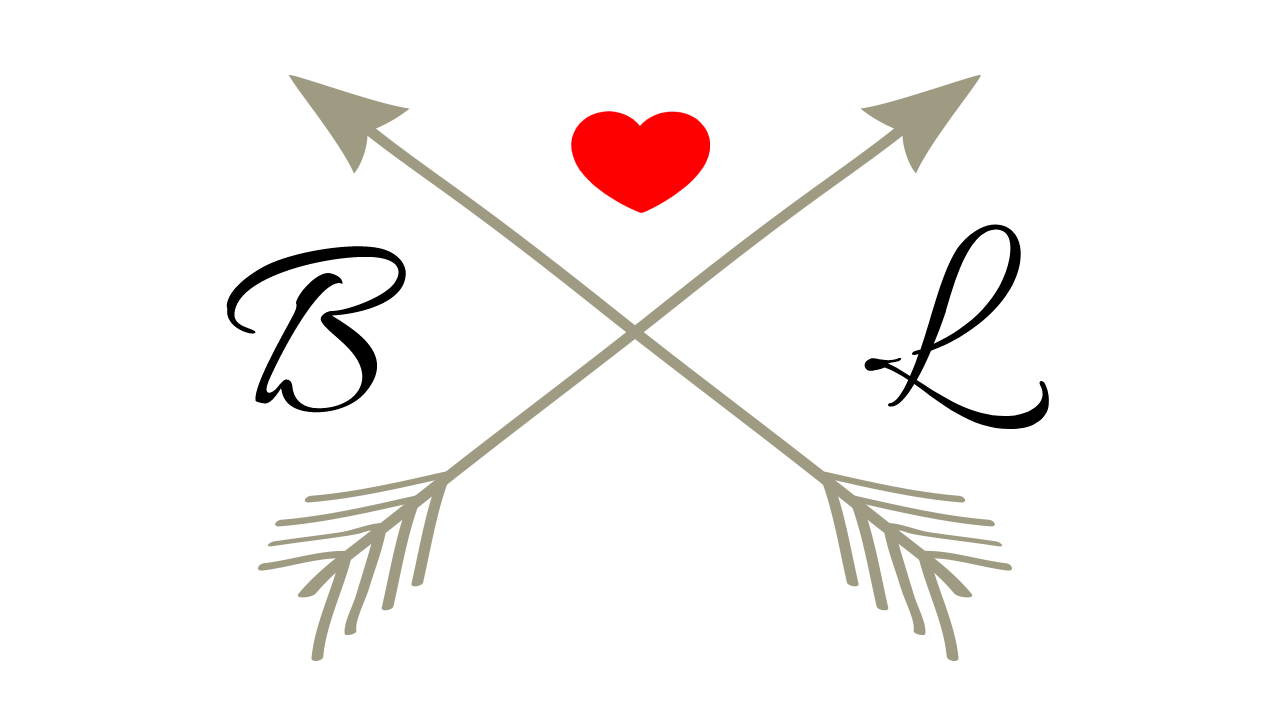
<style>
.page{position:relative;width:1280px;height:720px;background:#ffffff}
.page>*{position:absolute;margin:0}
.t1{font:250px "Allura-Regular";color:#000000}
</style>
<div class="page">
<p class="t1" style="left:864px;top:224px;width:185px;height:205px">L</p>
<p class="t1" style="left:225px;top:241px;width:181px;height:172px">B</p>
</div>
